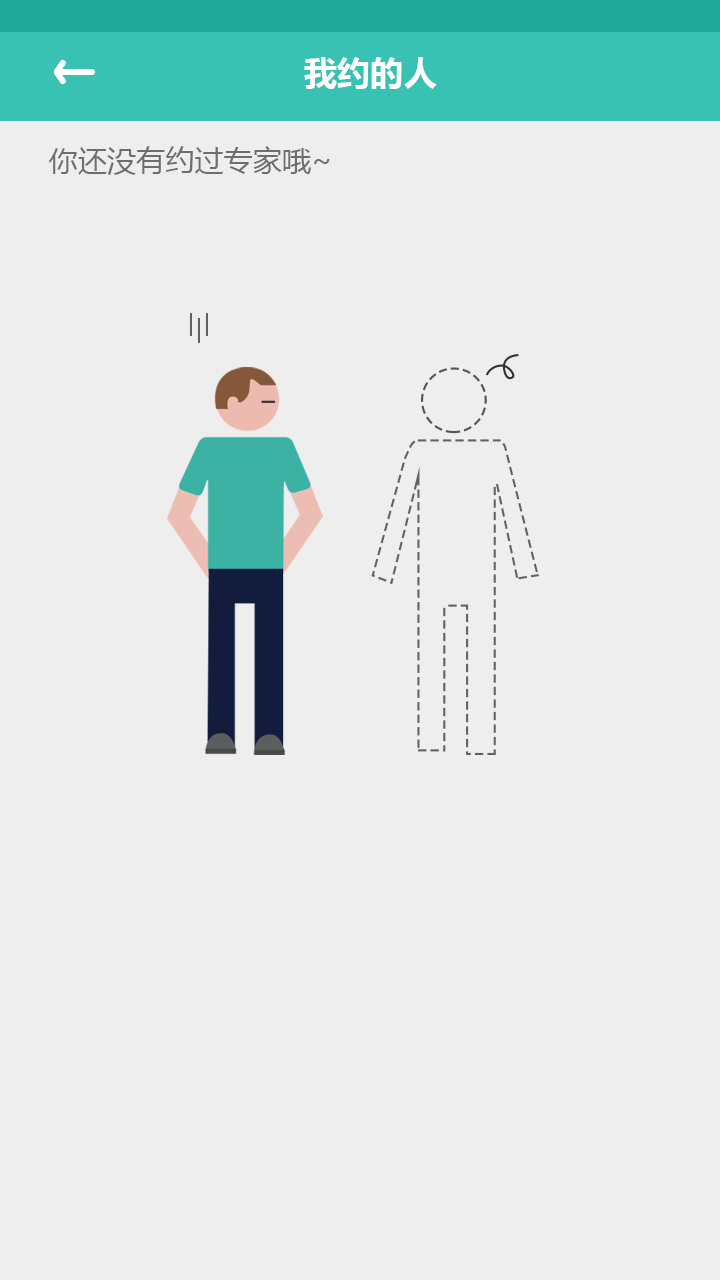
<style>
.page{position:relative;width:720px;height:1280px;background:#eeeeee}
.page>*{position:absolute;margin:0}
.t1{font:33.3px "MicrosoftYaHei-Bold";color:#fefefe}
.t2{font:29.2px "MicrosoftYaHei";color:#6e6e6e}
</style>
<div class="page">
<p class="t1" style="left:304px;top:57px;width:133px;height:32px">我约的人</p>
<p class="t2" style="left:49px;top:146px;width:281px;height:29px">你还没有约过专家哦~</p>
</div>
